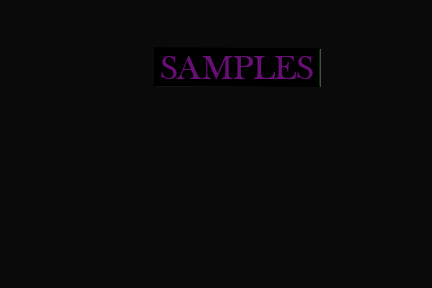
<style>
.page{position:relative;width:432px;height:288px;background:#0a0a0a}
.page>*{position:absolute;margin:0}
.t1{font:34.8px "BaskOldFace";color:#680f75}
</style>
<div class="page">
<p class="t1" style="left:161px;top:56px;width:152px;height:23px">SAMPLES</p>
</div>
